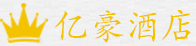
<style>
.page{position:relative;width:196px;height:46px}
.page>*{position:absolute;margin:0}
.t1{font:36px "STKaiti";color:#f3c300}
</style>
<div class="page">
<p class="t1" style="left:54px;top:10px;width:137px;height:33px">亿豪酒店</p>
</div>
